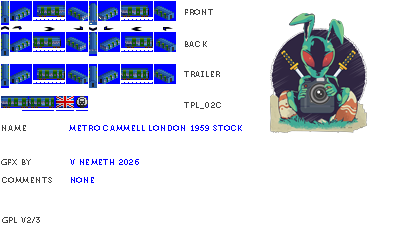
<style>
.page{position:relative;width:400px;height:230px;background:#ffffff}
.page>*{position:absolute;margin:0}
.t1{font:8px "Museo700-Regular";letter-spacing:0.075em;color:#404040;text-transform:uppercase}
.t2{font:8px "Museo700-Regular";letter-spacing:0.075em;color:#0000ff;text-transform:uppercase}
</style>
<div class="page">
<p class="t1" style="left:185px;top:9px;width:28px;height:6px">front</p>
<p class="t1" style="left:185px;top:41px;width:22px;height:6px">back</p>
<p class="t1" style="left:184px;top:71px;width:36px;height:6px">trailer</p>
<p class="t1" style="left:184px;top:102px;width:37px;height:7px">tpl_02c</p>
<p class="t1" style="left:2px;top:125px;width:24px;height:6px">name</p>
<p class="t2" style="left:69px;top:125px;width:173px;height:6px">Metro Cammell London 1959 Stock</p>
<p class="t1" style="left:1px;top:159px;width:30px;height:6px">gfx by</p>
<p class="t2" style="left:70px;top:159px;width:69px;height:6px">v nemeth 2026</p>
<p class="t1" style="left:2px;top:177px;width:50px;height:6px">comments</p>
<p class="t2" style="left:71px;top:177px;width:23px;height:6px">none</p>
<p class="t1" style="left:2px;top:217px;width:38px;height:6px">gpl v2/3</p>
</div>
